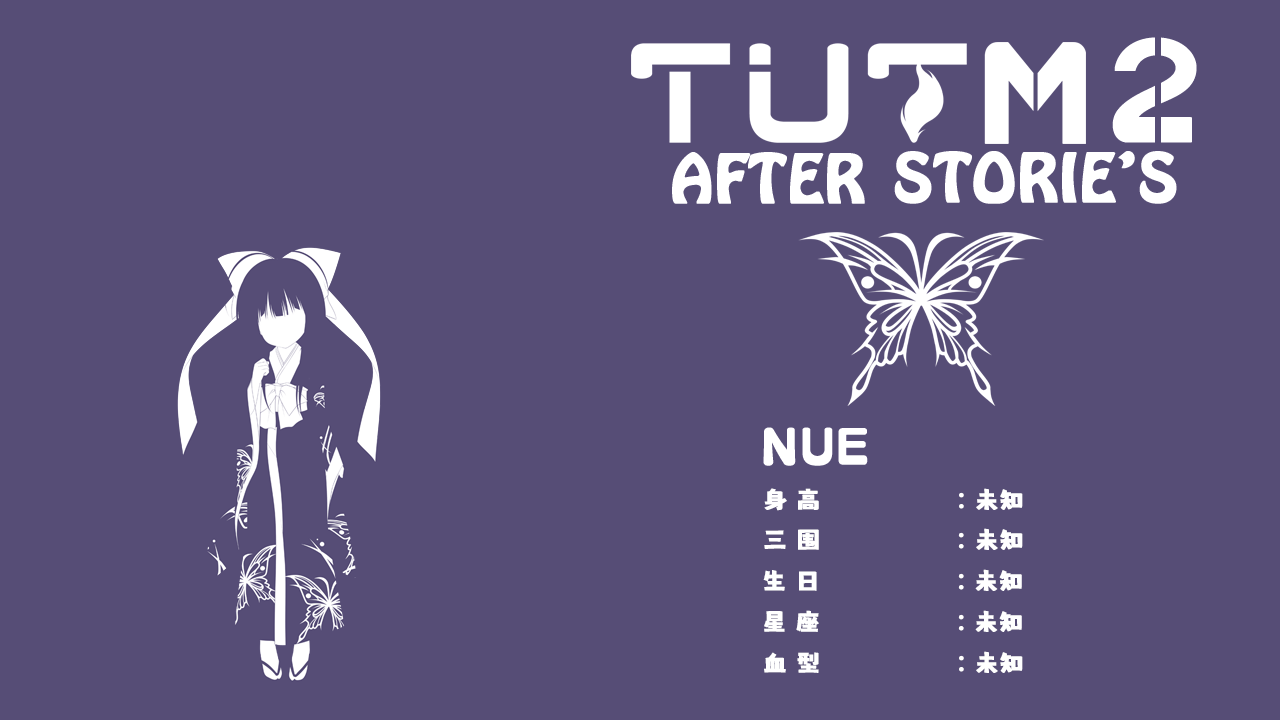
<style>
.page{position:relative;width:1280px;height:720px;background:#564d76}
.page>*{position:absolute;margin:0}
.t1{font:24px "MaokenAssortedSans";color:#ffffff;font-weight:bold}
.t2{font:24px "AdobeHeitiStd-Regular";color:#ffffff;font-weight:bold}
</style>
<div class="page">
<p class="t1" style="left:764px;top:488px;width:200px;height:23px">身 高               <span class="t2">：</span></p>
<p class="t1" style="left:976px;top:488px;width:47px;height:22px">未知</p>
<p class="t1" style="left:764px;top:529px;width:200px;height:21px">三 围               <span class="t2">：</span></p>
<p class="t1" style="left:976px;top:528px;width:47px;height:22px">未知</p>
<p class="t1" style="left:975px;top:569px;width:47px;height:22px">未知</p>
<p class="t1" style="left:763px;top:570px;width:201px;height:21px">生 日               <span class="t2">：</span></p>
<p class="t1" style="left:764px;top:610px;width:200px;height:22px">星 座               <span class="t2">：</span></p>
<p class="t1" style="left:975px;top:610px;width:47px;height:22px">未知</p>
<p class="t1" style="left:764px;top:652px;width:200px;height:21px">血 型               <span class="t2">：</span></p>
<p class="t1" style="left:976px;top:651px;width:47px;height:22px">未知</p>
</div>
